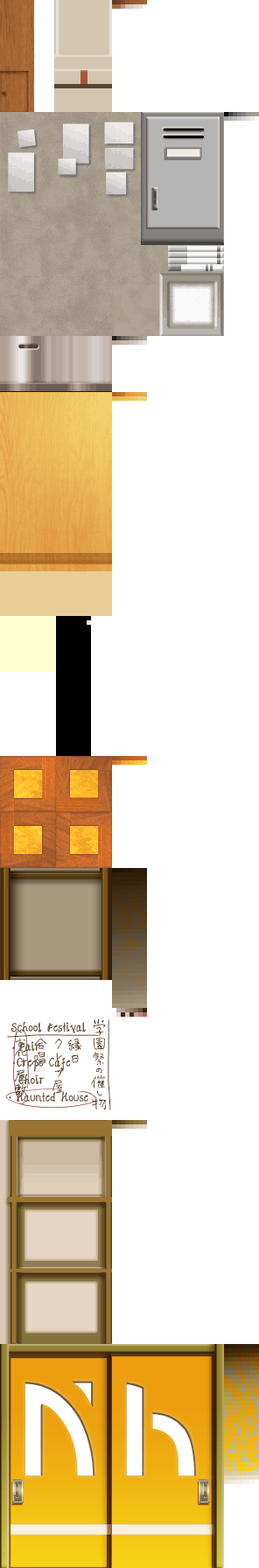
<style>
.page{position:relative;width:259px;height:1568px;background:#ffffff}
.page>*{position:absolute;margin:0}
.t1{font:12.2px/19.2px "cookies";letter-spacing:-0.025em;color:#68523c;font-weight:bold}
.t2{font:12.2px/14px "cookies";letter-spacing:-0.025em;color:#68523c;font-weight:bold}
.t3{font:12.2px/14px "AirplanesintheNightSky";letter-spacing:-0.025em;color:#68523c;font-weight:bold}
.t4{font:12.2px/17.5px "cookies";letter-spacing:-0.025em;color:#68523c;font-weight:bold}
.t5{font:12.2px/15.8px "cookies";letter-spacing:-0.025em;color:#68523c;font-weight:bold}
</style>
<div class="page">
<p class="t1" style="left:10px;top:1021px;width:78px;height:81px">School Festival<br>  Fair<br>  <span class="t2">Cre</span><span class="t3">p</span><span class="t2">e Cafe<br>   </span><span class="t4">Choir<br>  Haunted Hous</span><span class="t5">e</span></p>
</div>
